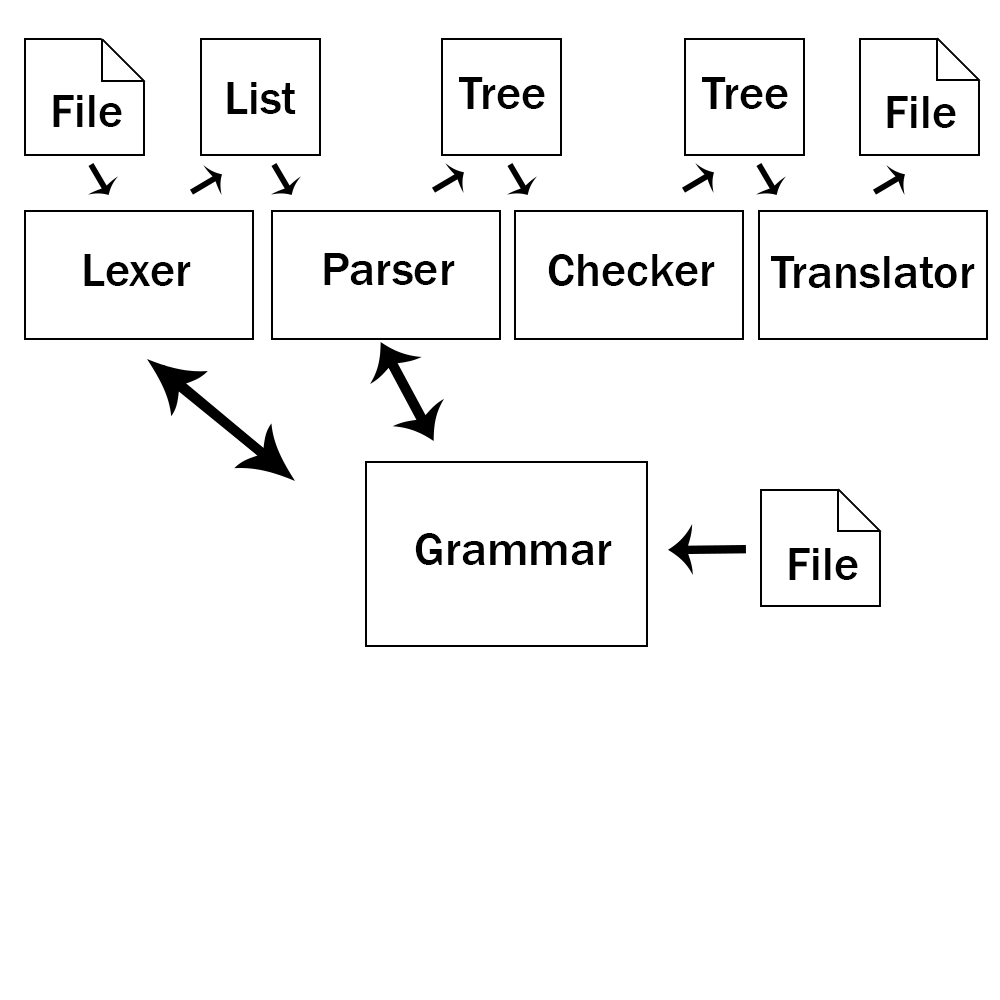
<style>
.page{position:relative;width:1000px;height:1000px;background:#ffffff}
.page>*{position:absolute;margin:0}
.t1{font:48px "FranklinGothic-Medium";color:#000000}
</style>
<div class="page">
<p class="t1" style="left:459px;top:77px;width:86px;height:32px">Tree</p>
<p class="t1" style="left:702px;top:77px;width:86px;height:32px">Tree</p>
<p class="t1" style="left:227px;top:82px;width:69px;height:32px">List</p>
<p class="t1" style="left:53px;top:95px;width:69px;height:32px">File</p>
<p class="t1" style="left:887px;top:96px;width:69px;height:32px">File</p>
<p class="t1" style="left:84px;top:254px;width:107px;height:32px">Lexer</p>
<p class="t1" style="left:324px;top:253px;width:131px;height:32px">Parser</p>
<p class="t1" style="left:548px;top:254px;width:167px;height:32px">Checker</p>
<p class="t1" style="left:771px;top:256px;width:204px;height:32px">Translator</p>
<p class="t1" style="left:415px;top:533px;width:197px;height:32px">Grammar</p>
<p class="t1" style="left:789px;top:548px;width:69px;height:32px">File</p>
</div>
